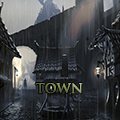
<style>
.page{position:relative;width:120px;height:120px}
.page>*{position:absolute;margin:0}
.t1{font:13px "TrajanPro-Bold"}
</style>
<div class="page">
<p class="t1" style="left:35px;top:83px;width:48px;height:11px">TOWN</p>
</div>
